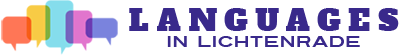
<style>
.page{position:relative;width:403px;height:55px;background:#ffffff}
.page>*{position:absolute;margin:0}
.t1{font:15px/15.2px "Turnpike";color:#39298b}
.t2{font:30px/11.9px "AlfaSlabOne-Regular";letter-spacing:0.26em;color:#39298b}
</style>
<div class="page">
<p class="t1" style="left:129px;top:8px;width:270px;height:39px;text-align:center"><span class="t2">LANGUAGES<br></span>IN LICHTENRADE</p>
</div>
